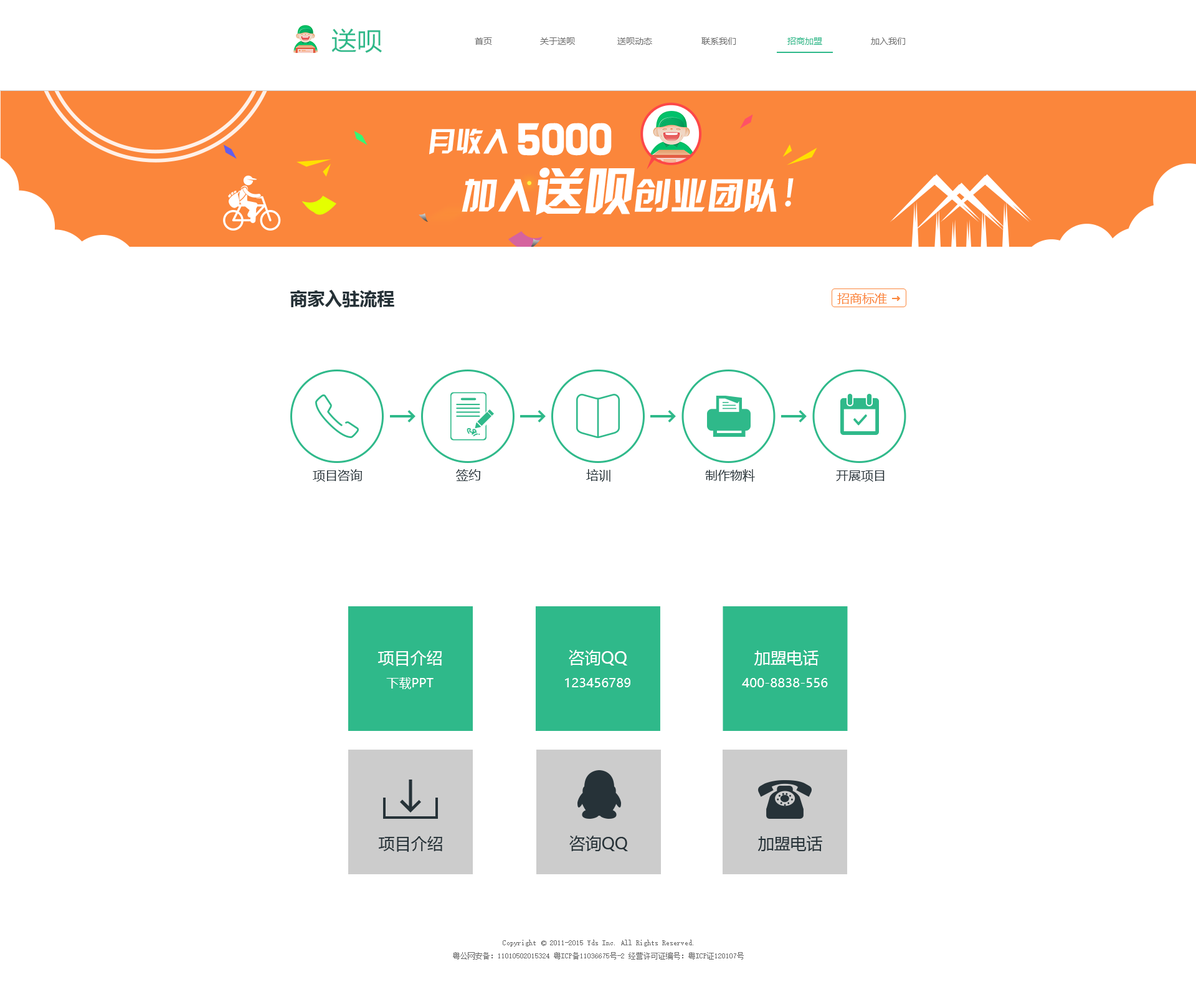
<style>
.page{position:relative;width:1196px;height:997px;background:#ffffff}
.page>*{position:absolute;margin:0}
.t1{font:24.9px "MicrosoftYaHei";color:#2fb98a}
.t2{font:8.7px "MicrosoftYaHei";color:#6f6f6f}
.t3{font:8.7px "MicrosoftYaHei";color:#2fb98a}
.t4{font:17.4px "MicrosoftYaHei-Bold";color:#263238}
.t5{font:12.5px "MicrosoftYaHei";color:#fb863b}
.t6{font:12.5px "MicrosoftYaHei";color:#263238}
.t7{font:16.2px "MicrosoftYaHei";color:#ffffff}
.t8{font:12.5px "MicrosoftYaHei";color:#ffffff}
.t9{font:16.2px "MicrosoftYaHei";color:#263238}
.t10{font:7.5px "SimSun";color:#666666}
.t11{font:10px "SimSun";color:#666666}
</style>
<div class="page">
<p class="t1" style="left:331px;top:28px;width:51px;height:25px">送呗</p>
<p class="t2" style="left:475px;top:37px;width:17px;height:8px">首页</p>
<p class="t2" style="left:617px;top:37px;width:35px;height:8px">送呗动态</p>
<p class="t2" style="left:702px;top:37px;width:34px;height:8px">联系我们</p>
<p class="t3" style="left:788px;top:37px;width:34px;height:8px">招商加盟</p>
<p class="t2" style="left:871px;top:37px;width:34px;height:8px">加入我们</p>
<p class="t4" style="left:290px;top:290px;width:104px;height:18px">商家入驻流程</p>
<p class="t5" style="left:837px;top:293px;width:50px;height:11px">招商标准</p>
<p class="t6" style="left:313px;top:469px;width:49px;height:13px">项目咨询</p>
<p class="t6" style="left:456px;top:469px;width:24px;height:12px">签约</p>
<p class="t6" style="left:586px;top:469px;width:25px;height:13px">培训</p>
<p class="t6" style="left:705px;top:469px;width:50px;height:13px">制作物料</p>
<p class="t6" style="left:836px;top:470px;width:49px;height:12px">开展项目</p>
<p class="t7" style="left:378px;top:650px;width:64px;height:16px">项目介绍</p>
<p class="t7" style="left:569px;top:650px;width:58px;height:15px">咨询QQ</p>
<p class="t7" style="left:754px;top:650px;width:65px;height:15px">加盟电话</p>
<p class="t8" style="left:386px;top:677px;width:48px;height:12px">下载PPT</p>
<p class="t8" style="left:565px;top:678px;width:66px;height:9px">123456789</p>
<p class="t8" style="left:742px;top:678px;width:86px;height:9px">400-8838-556</p>
<p class="t9" style="left:379px;top:836px;width:63px;height:16px">项目介绍</p>
<p class="t9" style="left:569px;top:835px;width:59px;height:16px">咨询QQ</p>
<p class="t9" style="left:758px;top:835px;width:64px;height:16px">加盟电话</p>
<p class="t10" style="left:503px;top:940px;width:190px;height:6px">Copyright<span class="t11"> ©</span> 2011-2015 Yds Inc. All Rights Reserved.</p>
<p class="t10" style="left:453px;top:952px;width:291px;height:7px">粤公网安备：11010502015324 粤ICP备11036675号-2 经营许可证编号：粤ICP证120107号</p>
</div>
